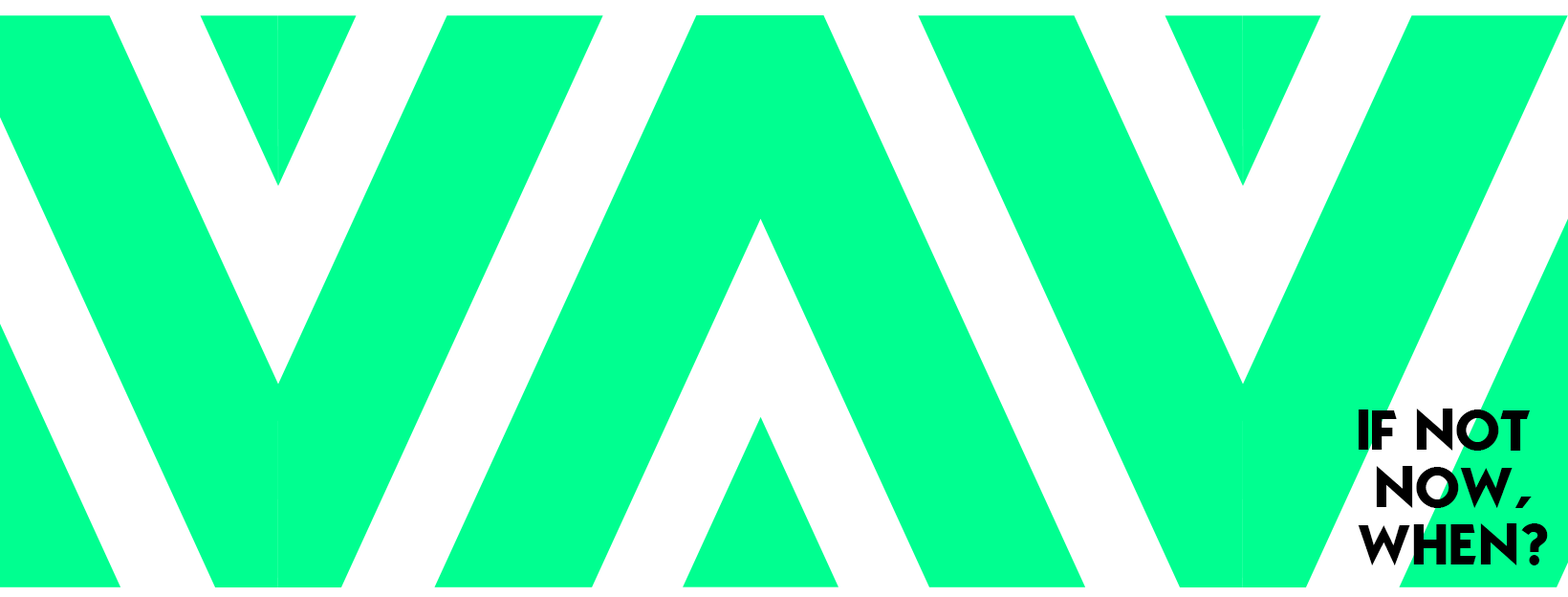
<style>
.page{position:relative;width:1568px;height:597px;background:#00ff90}
.page>*{position:absolute;margin:0}
.t1{font:57.4px/57.4px "Mouser";color:#000000}
</style>
<div class="page">
<p class="t1" style="left:1358px;top:408px;width:190px;height:157px;text-align:center">IF NOT <br>NOW,<br>WHEN?</p>
</div>
